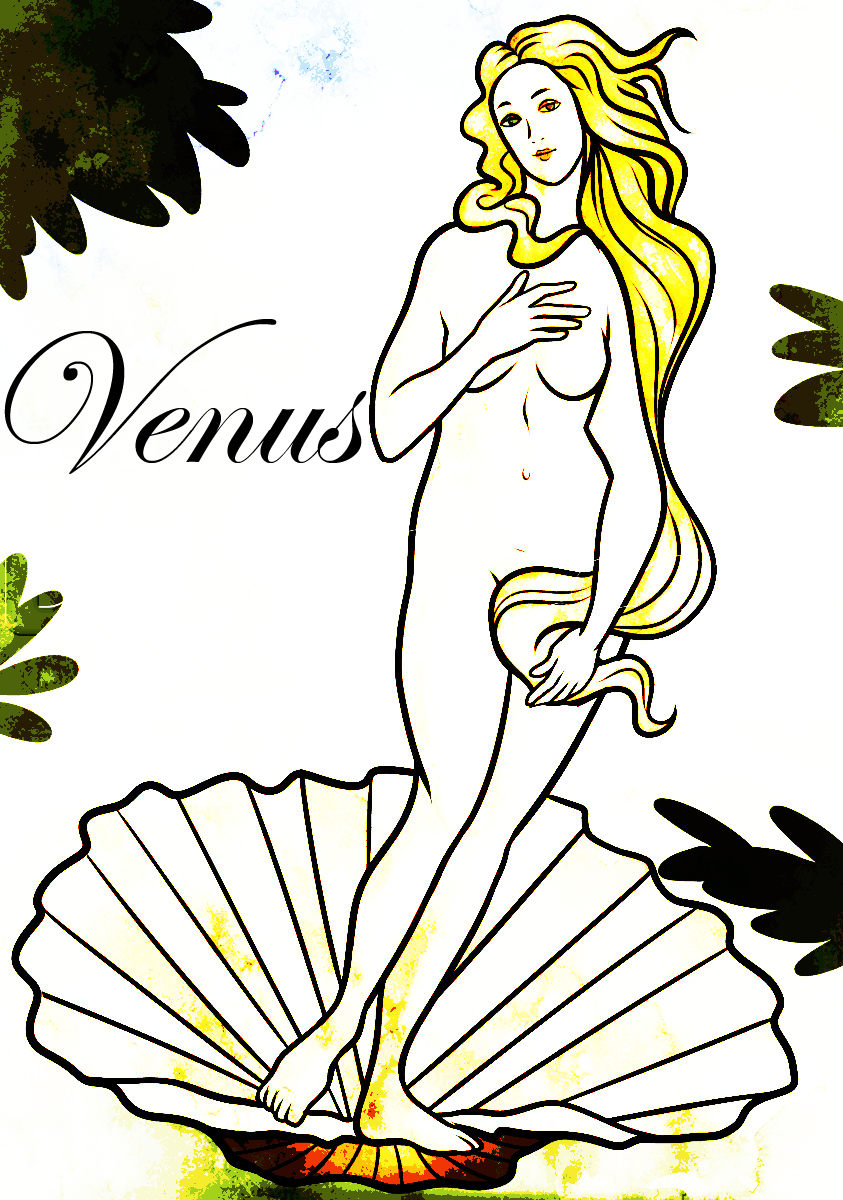
<style>
.page{position:relative;width:843px;height:1200px;background:#ffffff}
.page>*{position:absolute;margin:0}
.t1{font:200px "EdwardianScriptITC";color:#000000}
</style>
<div class="page">
<p class="t1" style="left:4px;top:319px;width:363px;height:155px">Venus</p>
</div>
